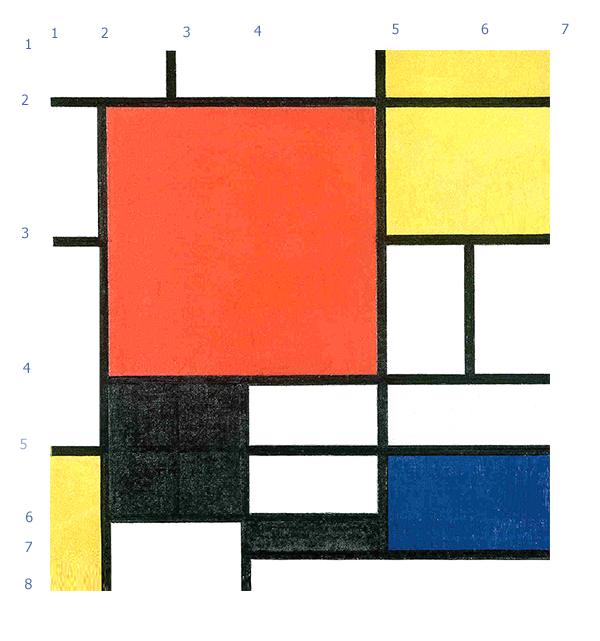
<style>
.page{position:relative;width:600px;height:641px;background:#ffffff}
.page>*{position:absolute;margin:0}
.t1{font:14px "Tahoma";color:#4c68a9}
.t2{font:14px "Tahoma";color:#94a4cb}
</style>
<div class="page">
<p class="t1" style="left:52px;top:27px;width:6px;height:11px">1</p>
<p class="t1" style="left:101px;top:27px;width:7px;height:11px">2</p>
<p class="t1" style="left:183px;top:26px;width:7px;height:12px">3</p>
<p class="t1" style="left:254px;top:25px;width:8px;height:11px">4</p>
<p class="t1" style="left:392px;top:23px;width:7px;height:12px">5</p>
<p class="t1" style="left:481px;top:23px;width:8px;height:12px">6</p>
<p class="t1" style="left:562px;top:23px;width:7px;height:11px">7</p>
<p class="t1" style="left:26px;top:38px;width:5px;height:11px">1</p>
<p class="t1" style="left:22px;top:94px;width:7px;height:11px">2</p>
<p class="t1" style="left:22px;top:227px;width:7px;height:12px">3</p>
<p class="t1" style="left:23px;top:362px;width:8px;height:11px">4</p>
<p class="t2" style="left:20px;top:438px;width:7px;height:12px">5</p>
<p class="t1" style="left:26px;top:511px;width:7px;height:12px">6</p>
<p class="t1" style="left:25px;top:541px;width:7px;height:11px">7</p>
<p class="t1" style="left:25px;top:578px;width:7px;height:12px">8</p>
</div>
